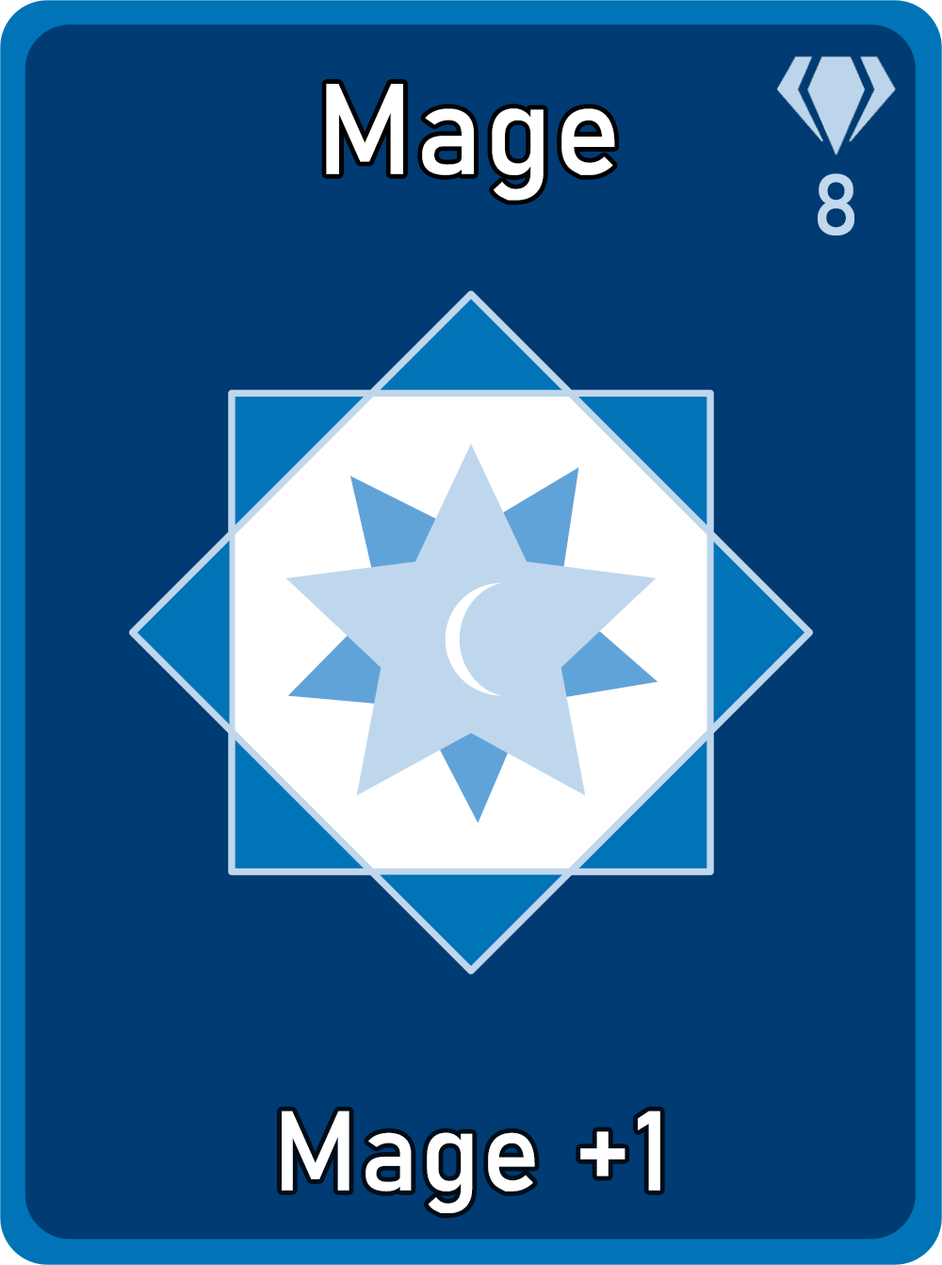
<style>
.page{position:relative;width:942px;height:1265px;background:#003b73}
.page>*{position:absolute;margin:0}
.t1{font:126.7px "Bahnschrift";letter-spacing:0.01em;color:#ffffff}
.t2{font:85px "Bahnschrift";letter-spacing:0.01em;color:#c1d8ed}
.t3{font:111.3px "Bahnschrift";letter-spacing:0.01em;color:#ffffff}
</style>
<div class="page">
<p class="t1" style="left:326px;top:84px;width:289px;height:117px">Mage</p>
<p class="t2" style="left:818px;top:173px;width:37px;height:63px">8</p>
<p class="t3" style="left:282px;top:1111px;width:379px;height:103px">Mage +1</p>
</div>
